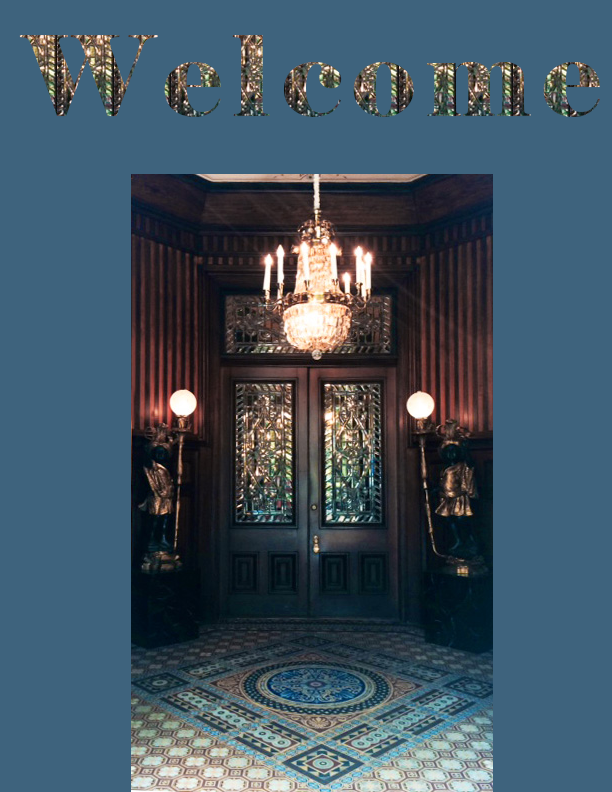
<style>
.page{position:relative;width:612px;height:792px;background:#3e637d}
.page>*{position:absolute;margin:0}
.t1{font:111px "Elephant-Regular";letter-spacing:0.1em}
</style>
<div class="page">
<p class="t1" style="left:19px;top:35px;width:581px;height:82px">Welcome</p>
</div>
